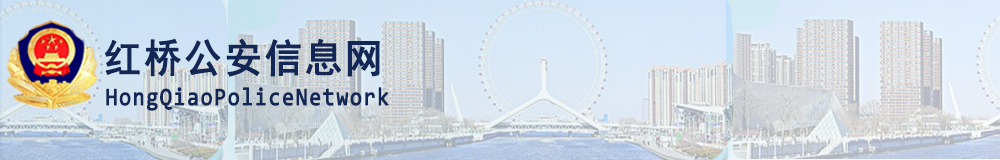
<style>
.page{position:relative;width:1000px;height:160px}
.page>*{position:absolute;margin:0}
.t1{font:39.7px "SimHei";letter-spacing:0.05em;color:#122755;font-weight:bold;scale:0.94 1}
.t2{font:25.1px "Consolas";letter-spacing:0.05em;color:#122755;font-weight:bold;scale:0.86 1}
</style>
<div class="page">
<p class="t1" style="left:105px;top:38px;width:275px;height:39px">红桥公安信息网</p>
<p class="t2" style="left:106px;top:87px;width:283px;height:24px">HongQiaoPoliceNetwork</p>
</div>
